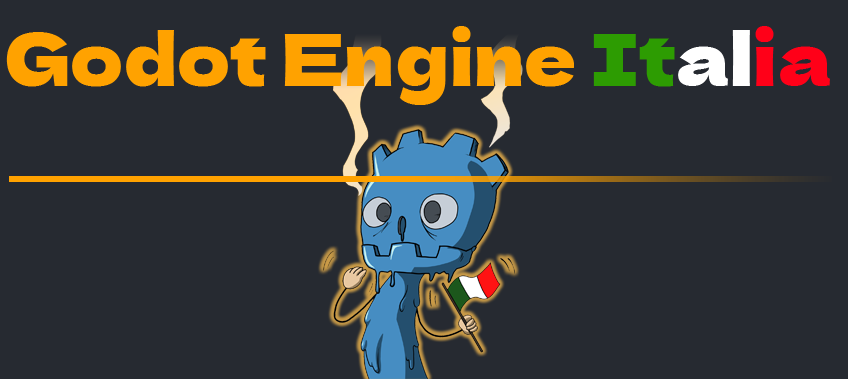
<style>
.page{position:relative;width:848px;height:379px;background:#262a31}
.page>*{position:absolute;margin:0}
.t1{font:72.4px "DelaGothicOne-Regular";color:#ffa200}
.t2{font:72.4px "DelaGothicOne-Regular";color:#2d9c02}
.t3{font:72.4px "DelaGothicOne-Regular";color:#ffffff}
.t4{font:72.4px "DelaGothicOne-Regular";color:#ff0018}
</style>
<div class="page">
<p class="t1" style="left:6px;top:26px;width:824px;height:79px">Godot Engine <span class="t2">It</span><span class="t3">al</span><span class="t4">ia</span></p>
</div>
